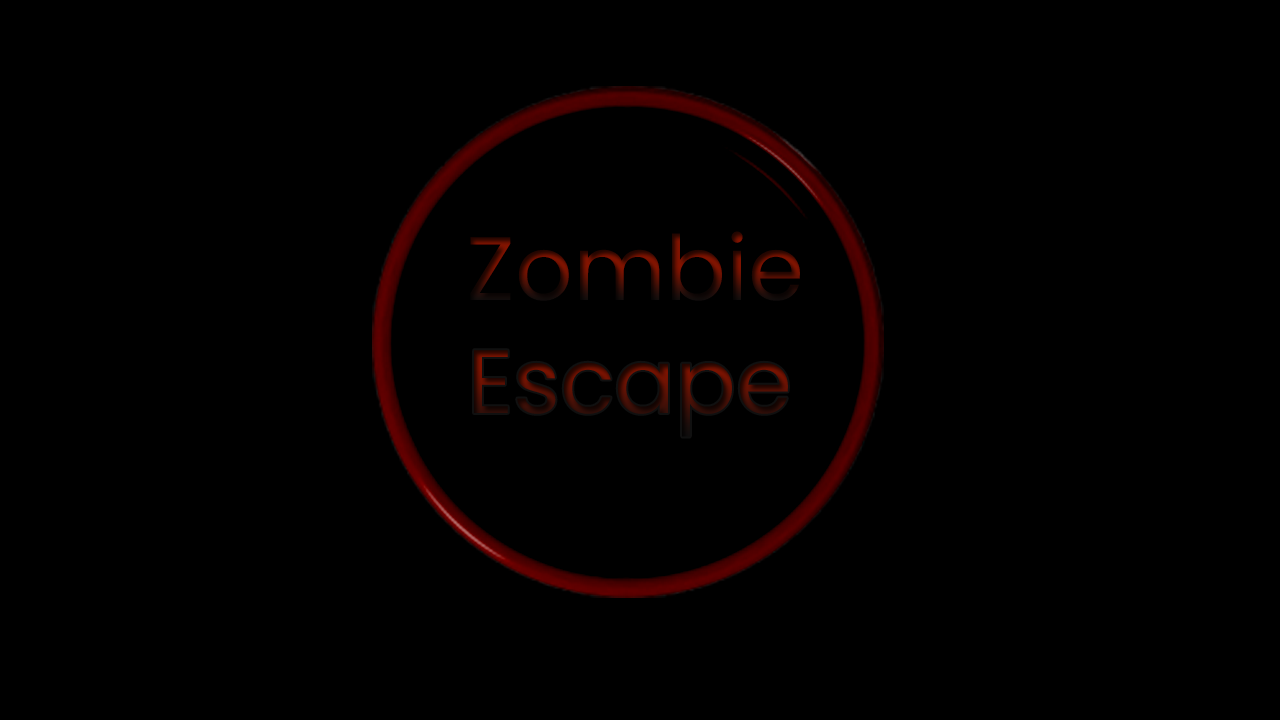
<style>
.page{position:relative;width:1280px;height:720px;background:#000000}
.page>*{position:absolute;margin:0}
.t1{font:90px "Poppins-Regular"}
</style>
<div class="page">
<p class="t1" style="left:470px;top:231px;width:330px;height:70px">Zombie</p>
<p class="t1" style="left:474px;top:350px;width:314px;height:87px">Escape</p>
</div>
